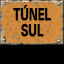
<style>
.page{position:relative;width:64px;height:64px;background:#000000}
.page>*{position:absolute;margin:0}
.t1{font:12px/16.7px "UniversNextPro-Bold";letter-spacing:-0.04em;color:#000000;text-transform:uppercase;font-weight:bold;scale:0.7 1}
</style>
<div class="page">
<p class="t1" style="left:13px;top:5px;width:39px;height:32px;text-align:center">túnel<br>sul</p>
</div>
